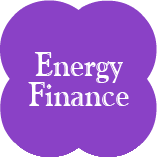
<style>
.page{position:relative;width:157px;height:157px;background:#8a41c6}
.page>*{position:absolute;margin:0}
.t1{font:33.9px/30px "GoudyHandtooledBT-Regular";color:#ffffff;scale:0.9 1}
</style>
<div class="page">
<p class="t1" style="left:28px;top:52px;width:101px;height:54px;text-align:center">Energy<br> Finance</p>
</div>
